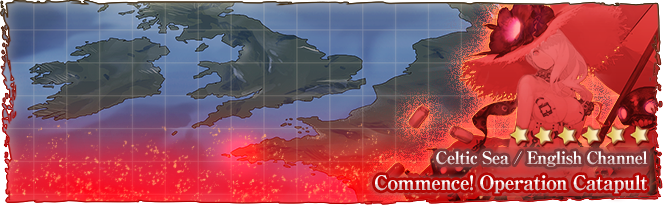
<style>
.page{position:relative;width:663px;height:205px}
.page>*{position:absolute;margin:0}
.t1{font:17px "RyuminPro-ExBold";letter-spacing:-0.04em}
.t2{font:20px "RyuminPro-ExBold";letter-spacing:-0.04em}
</style>
<div class="page">
<p class="t1" style="left:436px;top:151px;width:212px;height:16px">Celtic Sea / English Channel</p>
<p class="t2" style="left:375px;top:175px;width:272px;height:19px">Commence! Operation Catapult</p>
</div>
